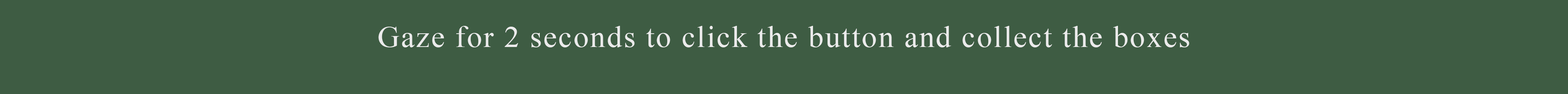
<style>
.page{position:relative;width:1568px;height:94px;background:#3e5c43}
.page>*{position:absolute;margin:0}
.t1{font:30.4px "TimesNewRomanPSMT";letter-spacing:0.05em;color:#ebebeb}
</style>
<div class="page">
<p class="t1" style="left:378px;top:26px;width:811px;height:21px">Gaze for 2 seconds to click the button and collect the boxes</p>
</div>
